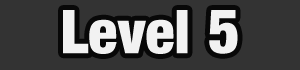
<style>
.page{position:relative;width:300px;height:70px;background:#333333}
.page>*{position:absolute;margin:0}
.t1{font:60px "Harvest";color:#f2f2f2}
</style>
<div class="page">
<p class="t1" style="left:63px;top:10px;width:175px;height:44px">Level 5</p>
</div>
